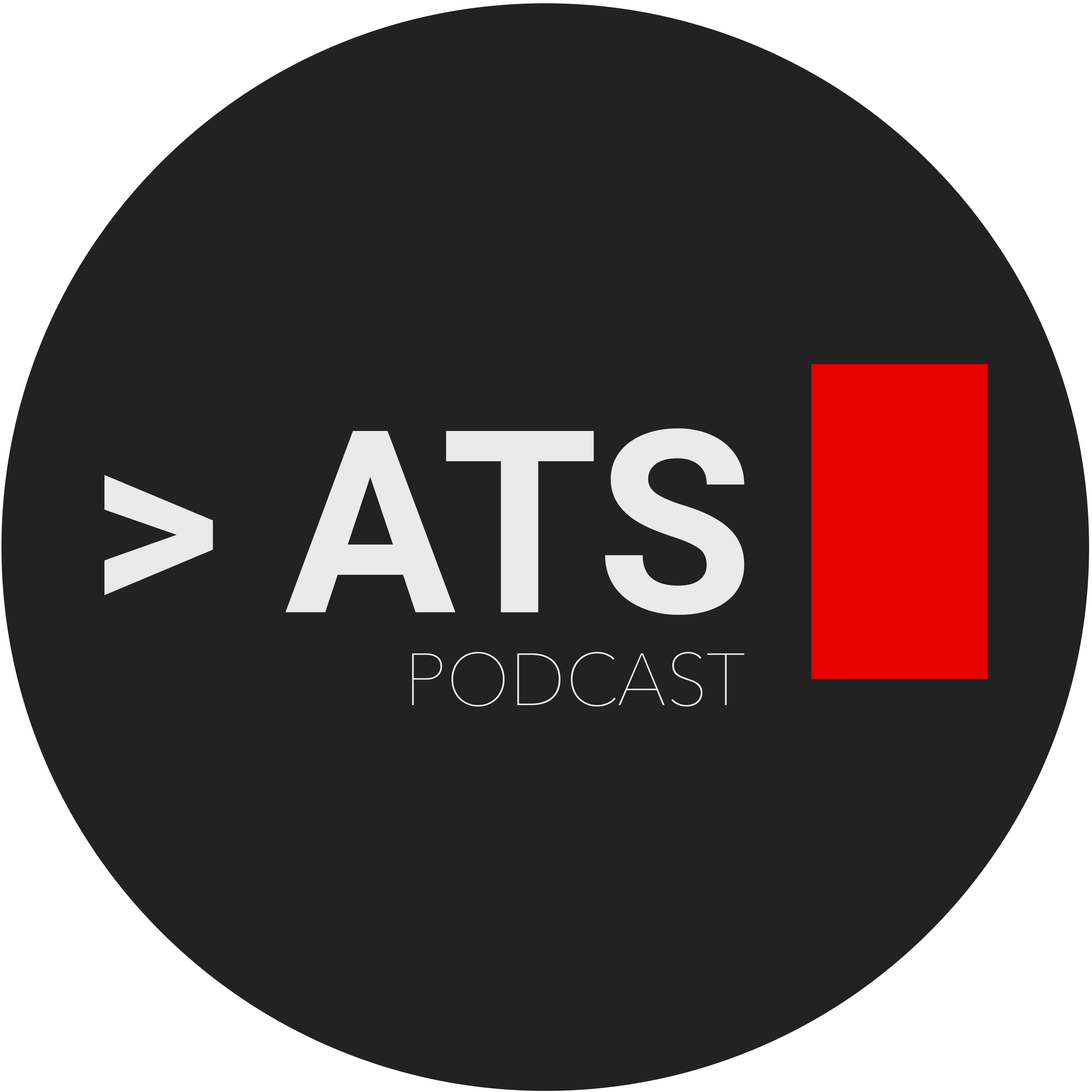
<style>
.page{position:relative;width:1092px;height:1092px;background:#222222}
.page>*{position:absolute;margin:0}
.t1{font:254.8px "Roboto-Bold";color:#eaeaea}
.t2{font:72.8px "AvenirNext-UltraLight";color:#eaeaea}
</style>
<div class="page">
<p class="t1" style="left:104px;top:428px;width:640px;height:187px">&gt; ATS</p>
<p class="t2" style="left:412px;top:652px;width:332px;height:55px">PODCAST</p>
</div>
